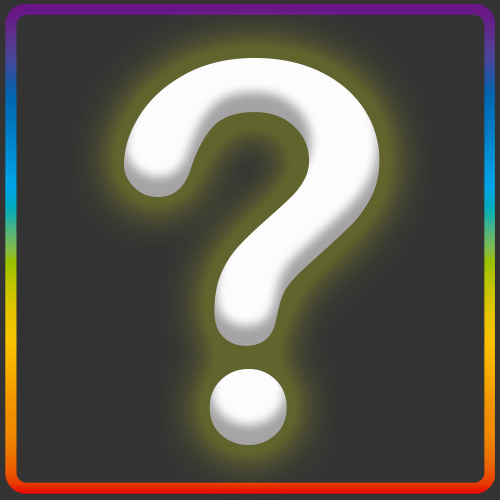
<style>
.page{position:relative;width:500px;height:500px;background:#333333}
.page>*{position:absolute;margin:0}
.t1{font:523.3px "ArialRoundedMTBold";color:#fdfafa}
</style>
<div class="page">
<p class="t1" style="left:123px;top:58px;width:257px;height:387px">?</p>
</div>
